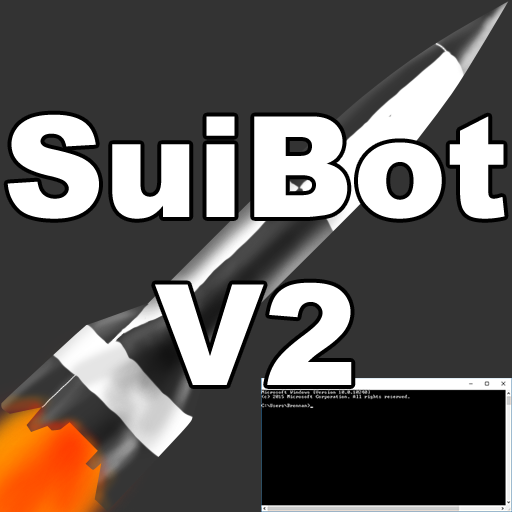
<style>
.page{position:relative;width:512px;height:512px;background:#333333}
.page>*{position:absolute;margin:0}
.t1{font:140px "Arial-Black";color:#ffffff}
</style>
<div class="page">
<p class="t1" style="left:7px;top:114px;width:498px;height:271px;text-align:center">SuiBot<br>V2</p>
</div>
